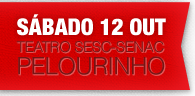
<style>
.page{position:relative;width:195px;height:96px}
.page>*{position:absolute;margin:0}
.t1{font:23px "HelveticaNeue-CondensedBlack";color:#ffffff}
.t2{font:15px/22.2px "Helvetica-Light";letter-spacing:-0.025em;color:#791515}
.t3{font:23.9px/22.2px "Helvetica-Light";letter-spacing:-0.025em;color:#791515}
</style>
<div class="page">
<p class="t1" style="left:17px;top:14px;width:149px;height:22px">SÁBADO 12 OUT</p>
<p class="t2" style="left:16px;top:41px;width:149px;height:34px">TEATRO SESC-SENAC<br><span class="t3">PELOURINHO</span></p>
</div>
